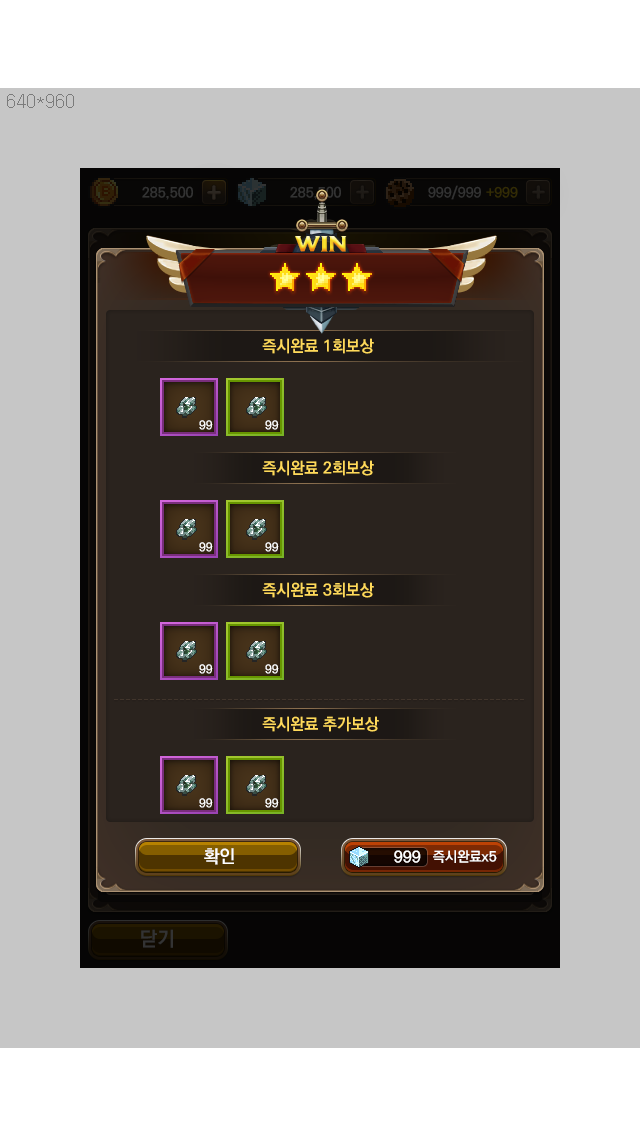
<style>
.page{position:relative;width:640px;height:1136px;background:#c6c6c6}
.page>*{position:absolute;margin:0}
.t1{font:16px "KoPubDotumBold";color:#ffda5b}
.t2{font:11.9px "KoPubDotumBold";color:#ffffff}
.t3{font:18px "KoPubDotumBold";color:#ffffff}
.t4{font:16px "KoPubDotumBold";color:#ffffff}
.t5{font:14px "KoPubDotumBold";color:#ffffff}
</style>
<div class="page">
<p class="t1" style="left:262px;top:338px;width:112px;height:16px">즉시완료 1회보상</p>
<p class="t2" style="left:199px;top:420px;width:14px;height:10px">99</p>
<p class="t2" style="left:265px;top:420px;width:14px;height:10px">99</p>
<p class="t1" style="left:262px;top:460px;width:112px;height:16px">즉시완료 2회보상</p>
<p class="t2" style="left:199px;top:542px;width:14px;height:10px">99</p>
<p class="t2" style="left:265px;top:542px;width:14px;height:10px">99</p>
<p class="t1" style="left:262px;top:582px;width:112px;height:16px">즉시완료 3회보상</p>
<p class="t2" style="left:199px;top:664px;width:14px;height:10px">99</p>
<p class="t2" style="left:265px;top:664px;width:14px;height:10px">99</p>
<p class="t1" style="left:262px;top:716px;width:117px;height:16px">즉시완료 추가보상</p>
<p class="t2" style="left:199px;top:798px;width:14px;height:10px">99</p>
<p class="t2" style="left:265px;top:798px;width:14px;height:10px">99</p>
<p class="t3" style="left:204px;top:848px;width:30px;height:17px">확인</p>
<p class="t4" style="left:394px;top:850px;width:27px;height:13px">999</p>
<p class="t5" style="left:433px;top:850px;width:64px;height:13px">즉시완료x5</p>
</div>
